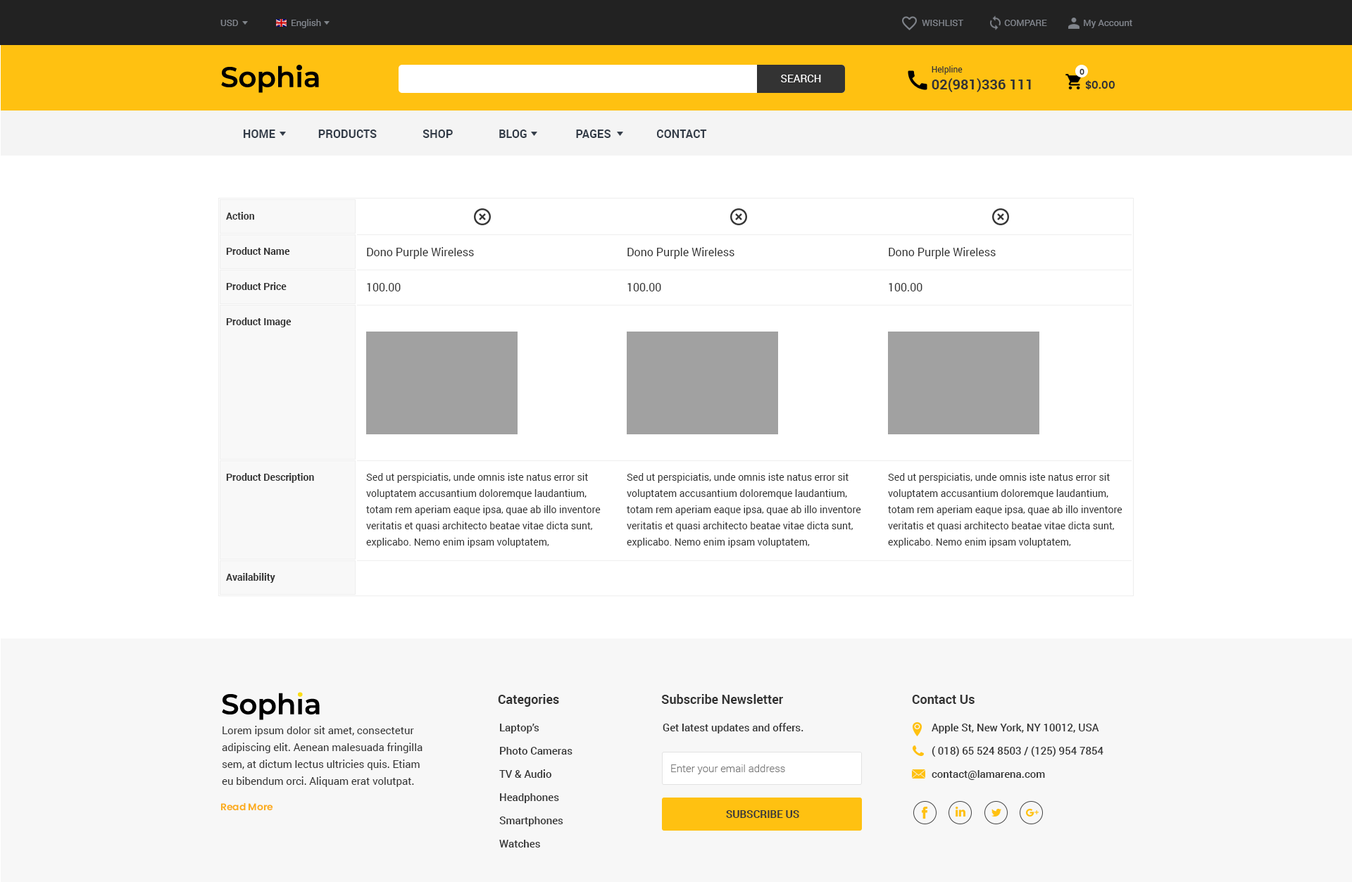
<style>
.page{position:relative;width:1352px;height:882px;background:#ffffff}
.page>*{position:absolute;margin:0}
.t1{font:9.2px "Roboto-Regular";color:#81858c}
.t2{font:14.1px "Roboto-Bold";color:#333333}
.t3{font:8.4px "Roboto-Regular";color:#333333}
.t4{font:10.6px "Roboto-Regular";color:#ffffff}
.t5{font:7.7px "Poppins-SemiBold";color:#333333}
.t6{font:10.6px "Poppins-SemiBold";color:#333333}
.t7{font:11.3px "Roboto-Bold";color:#333c48}
.t8{font:9.9px "Roboto-Bold";color:#333333}
.t9{font:11.3px "Roboto-Regular";color:#333333}
.t10{font:9.9px/16.2px "Roboto-Regular";color:#333333}
.t11{font:12.7px "Roboto-Bold";color:#333333}
.t12{font:10.6px/16.9px "Roboto-Regular";color:#333333}
.t13{font:10.6px/23.2px "Roboto-Medium";color:#333333}
.t14{font:10.6px "Roboto-Medium";color:#333333}
.t15{font:10.6px "Roboto-Light";color:#777777}
.t16{font:9.6px "Poppins-SemiBold";color:#fbad1a}
.t17{font:10.6px "Roboto-Bold";color:#383838}
</style>
<div class="page">
<p class="t1" style="left:220px;top:20px;width:18px;height:6px">USD</p>
<p class="t1" style="left:291px;top:19px;width:30px;height:9px">English</p>
<p class="t1" style="left:922px;top:20px;width:210px;height:8px">WISHLIST                  COMPARE                My Account</p>
<p class="t2" style="left:931px;top:65px;width:100px;height:27px"><span class="t3">Helpline<br></span>02(981)336 111</p>
<p class="t4" style="left:781px;top:75px;width:40px;height:7px">SEARCH</p>
<p class="t5" style="left:1079px;top:68px;width:5px;height:7px">0</p>
<p class="t6" style="left:1085px;top:80px;width:29px;height:10px">$0.00</p>
<p class="t7" style="left:244px;top:130px;width:463px;height:8px">HOME               PRODUCTS                SHOP                BLOG                 PAGES                CONTACT</p>
<p class="t8" style="left:226px;top:212px;width:28px;height:8px">Action</p>
<p class="t8" style="left:226px;top:247px;width:64px;height:8px">Product Name</p>
<p class="t9" style="left:367px;top:247px;width:107px;height:12px">Dono Purple Wireless</p>
<p class="t9" style="left:627px;top:247px;width:107px;height:12px">Dono Purple Wireless</p>
<p class="t9" style="left:888px;top:247px;width:107px;height:12px">Dono Purple Wireless</p>
<p class="t8" style="left:226px;top:282px;width:61px;height:8px">Product Price</p>
<p class="t9" style="left:367px;top:283px;width:34px;height:8px">100.00</p>
<p class="t9" style="left:627px;top:283px;width:34px;height:8px">100.00</p>
<p class="t9" style="left:888px;top:283px;width:34px;height:8px">100.00</p>
<p class="t8" style="left:226px;top:318px;width:65px;height:9px">Product Image</p>
<p class="t8" style="left:226px;top:473px;width:88px;height:10px">Product Description</p>
<p class="t10" style="left:366px;top:473px;width:235px;height:75px">Sed ut perspiciatis, unde omnis iste natus error sit voluptatem accusantium doloremque laudantium, totam rem aperiam eaque ipsa, quae ab illo inventore veritatis et quasi architecto beatae vitae dicta sunt, explicabo. Nemo enim ipsam voluptatem,</p>
<p class="t10" style="left:627px;top:473px;width:234px;height:75px">Sed ut perspiciatis, unde omnis iste natus error sit voluptatem accusantium doloremque laudantium, totam rem aperiam eaque ipsa, quae ab illo inventore veritatis et quasi architecto beatae vitae dicta sunt, explicabo. Nemo enim ipsam voluptatem,</p>
<p class="t10" style="left:888px;top:473px;width:234px;height:75px">Sed ut perspiciatis, unde omnis iste natus error sit voluptatem accusantium doloremque laudantium, totam rem aperiam eaque ipsa, quae ab illo inventore veritatis et quasi architecto beatae vitae dicta sunt, explicabo. Nemo enim ipsam voluptatem,</p>
<p class="t8" style="left:226px;top:573px;width:49px;height:10px">Availability</p>
<p class="t11" style="left:498px;top:694px;width:61px;height:13px">Categories</p>
<p class="t11" style="left:661px;top:694px;width:122px;height:10px">Subscribe Newsletter</p>
<p class="t11" style="left:912px;top:695px;width:62px;height:9px">Contact Us</p>
<p class="t12" style="left:222px;top:726px;width:200px;height:61px">Lorem ipsum dolor sit amet, consectetur adipiscing elit. Aenean malesuada fringilla sem, at dictum lectus ultricies quis. Etiam eu bibendum orci. Aliquam erat volutpat.</p>
<p class="t13" style="left:499px;top:724px;width:73px;height:124px">Laptop’s<br>Photo Cameras<br>TV &amp; Audio<br>Headphones<br>Smartphones<br>Watches</p>
<p class="t14" style="left:662px;top:723px;width:141px;height:11px">Get latest updates and offers.</p>
<p class="t13" style="left:931px;top:724px;width:172px;height:56px">Apple St, New York, NY 10012, USA<br>( 018) 65 524 8503 / (125) 954 7854<br>contact@lamarena.com</p>
<p class="t15" style="left:671px;top:765px;width:114px;height:9px">Enter your email address</p>
<p class="t16" style="left:220px;top:803px;width:53px;height:8px">Read More</p>
<p class="t17" style="left:726px;top:810px;width:73px;height:8px">SUBSCRIBE US</p>
</div>
